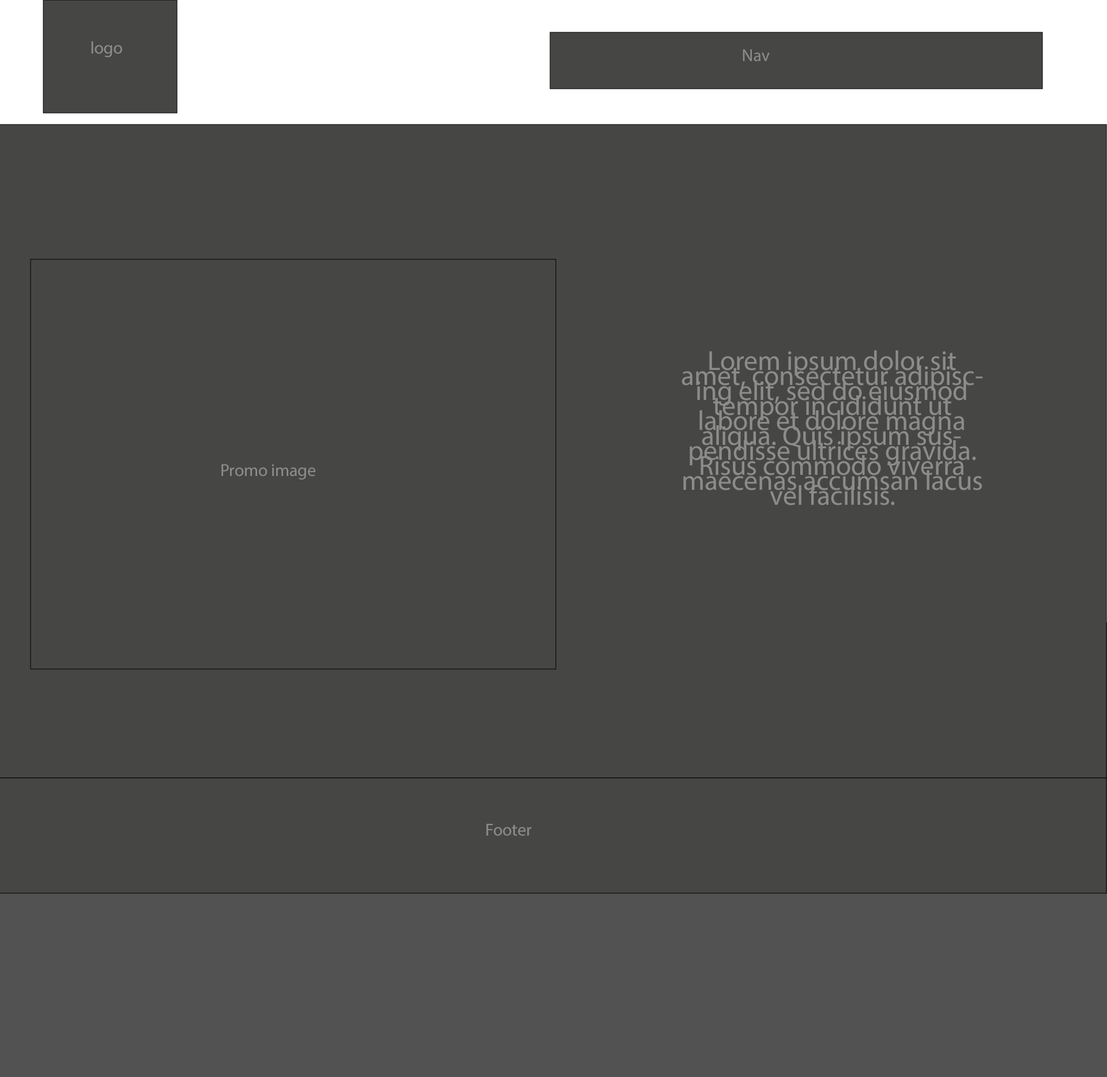
<style>
.page{position:relative;width:1107px;height:1077px;background:#464645}
.page>*{position:absolute;margin:0}
.t1{font:17.3px "MyriadPro-Regular";color:#8c8c8c}
.t2{font:27.7px/15px "MyriadPro-Regular";color:#8c8c8c}
</style>
<div class="page">
<p class="t1" style="left:91px;top:41px;width:31px;height:17px">logo</p>
<p class="t1" style="left:742px;top:49px;width:28px;height:13px">Nav</p>
<p class="t2" style="left:681px;top:350px;width:302px;height:156px;text-align:center">Lorem ipsum dolor sit amet, consectetur adipiscing elit, sed do eiusmod tempor incididunt ut labore et dolore magna aliqua. Quis ipsum suspendisse ultrices gravida. Risus commodo viverra maecenas accumsan lacus vel facilisis.</p>
<p class="t1" style="left:221px;top:464px;width:94px;height:16px">Promo image</p>
<p class="t1" style="left:486px;top:824px;width:45px;height:12px">Footer</p>
</div>
